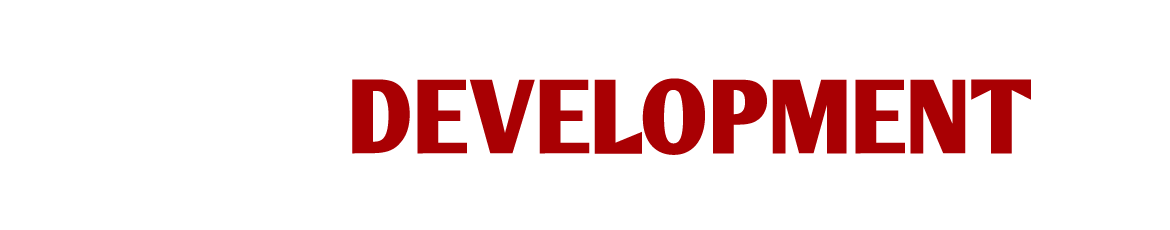
<style>
.page{position:relative;width:1170px;height:230px;background:#ffffff}
.page>*{position:absolute;margin:0}
.t1{font:103.1px "ArmWrestler-Bold";color:#a90003}
.t2{font:103.1px "ArmWrestler-Bold";color:#ffffff}
</style>
<div class="page">
<p class="t1" style="left:140px;top:78px;width:891px;height:77px"><span class="t2">WEB</span>DEVELOPMENT</p>
</div>
